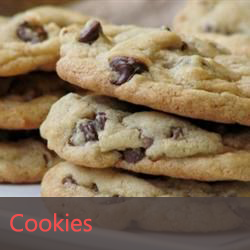
<style>
.page{position:relative;width:250px;height:250px}
.page>*{position:absolute;margin:0}
.t1{font:24px "MicrosoftTaiLe";color:#f14e4e}
</style>
<div class="page">
<p class="t1" style="left:10px;top:213px;width:82px;height:19px">Cookies</p>
</div>
